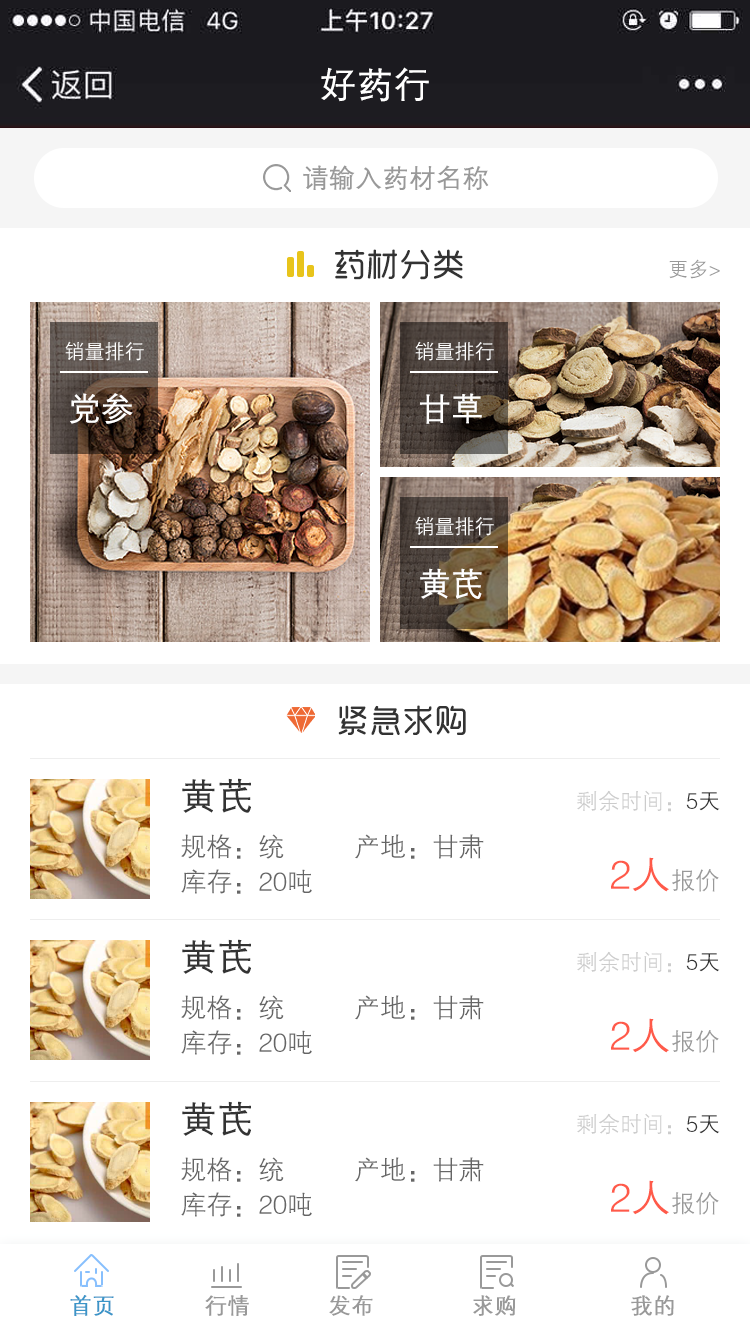
<style>
.page{position:relative;width:750px;height:1334px;background:#ffffff}
.page>*{position:absolute;margin:0}
.t1{font:36px "FZZDXJW--GB1-0";color:#ffffff;font-weight:bold}
.t2{font:26px "FZZDXJW--GB1-0";color:#999999;font-weight:bold}
.t3{font:32.1px "RTWSYueRoudGoDemo-Regular";color:#333333;font-weight:bold}
.t4{font:20px "FZZDXJW--GB1-0";color:#999999}
.t5{font:20px "FZZDXJW--GB1-0";color:#ffffff}
.t6{font:32px "FZZDXJW--GB1-0";color:#ffffff;font-weight:bold}
.t7{font:32px "RTWSYueRoudGoDemo-Regular";color:#333333;font-weight:bold}
.t8{font:36px "FZZDXJW--GB1-0";color:#333333;font-weight:bold}
.t9{font:22px "FZZDXJW--GB1-0";color:#cccccc}
.t10{font:22px "FZZDXJW--GB1-0";color:#333333}
.t11{font:26px "FZZDXJW--GB1-0";color:#666666}
.t12{font:40px "FZZDXJW--GB1-0";color:#ff5a49}
.t13{font:24px "FZZDXJW--GB1-0";color:#999999}
.t14{font:22px "FZZDXJW--GB1-0";color:#3b95c8;font-weight:bold}
.t15{font:22px "FZZDXJW--GB1-0";color:#999999;font-weight:bold}
</style>
<div class="page">
<p class="t1" style="left:321px;top:67px;width:108px;height:35px">好药行</p>
<p class="t2" style="left:303px;top:165px;width:186px;height:25px">请输入药材名称</p>
<p class="t3" style="left:335px;top:249px;width:128px;height:31px">药材分类</p>
<p class="t4" style="left:669px;top:259px;width:51px;height:20px">更多&gt;</p>
<p class="t5" style="left:65px;top:341px;width:79px;height:20px">销量排行</p>
<p class="t5" style="left:415px;top:341px;width:79px;height:20px">销量排行</p>
<p class="t6" style="left:70px;top:393px;width:63px;height:31px">党参</p>
<p class="t6" style="left:420px;top:393px;width:62px;height:31px">甘草</p>
<p class="t5" style="left:415px;top:516px;width:79px;height:20px">销量排行</p>
<p class="t6" style="left:420px;top:568px;width:62px;height:31px">黄芪</p>
<p class="t7" style="left:338px;top:705px;width:128px;height:30px">紧急求购</p>
<p class="t8" style="left:182px;top:778px;width:69px;height:35px">黄芪</p>
<p class="t9" style="left:577px;top:790px;width:143px;height:22px">剩余时间：<span class="t10">5天</span></p>
<p class="t11" style="left:181px;top:834px;width:103px;height:25px">规格：统</p>
<p class="t11" style="left:355px;top:834px;width:129px;height:25px">产地：甘肃</p>
<p class="t12" style="left:611px;top:857px;width:108px;height:35px">2人<span class="t13">报价</span></p>
<p class="t11" style="left:181px;top:869px;width:131px;height:25px">库存：20吨</p>
<p class="t8" style="left:182px;top:939px;width:69px;height:35px">黄芪</p>
<p class="t9" style="left:577px;top:951px;width:143px;height:22px">剩余时间：<span class="t10">5天</span></p>
<p class="t11" style="left:181px;top:995px;width:103px;height:25px">规格：统</p>
<p class="t11" style="left:355px;top:995px;width:129px;height:25px">产地：甘肃</p>
<p class="t12" style="left:611px;top:1018px;width:108px;height:35px">2人<span class="t13">报价</span></p>
<p class="t11" style="left:181px;top:1030px;width:131px;height:25px">库存：20吨</p>
<p class="t8" style="left:182px;top:1101px;width:69px;height:35px">黄芪</p>
<p class="t9" style="left:577px;top:1113px;width:143px;height:22px">剩余时间：<span class="t10">5天</span></p>
<p class="t11" style="left:181px;top:1157px;width:103px;height:25px">规格：统</p>
<p class="t11" style="left:355px;top:1157px;width:129px;height:25px">产地：甘肃</p>
<p class="t12" style="left:611px;top:1180px;width:108px;height:35px">2人<span class="t13">报价</span></p>
<p class="t11" style="left:181px;top:1192px;width:131px;height:25px">库存：20吨</p>
<p class="t14" style="left:70px;top:1295px;width:44px;height:21px">首页</p>
<p class="t15" style="left:205px;top:1295px;width:44px;height:21px">行情</p>
<p class="t15" style="left:329px;top:1295px;width:44px;height:21px">发布</p>
<p class="t15" style="left:473px;top:1295px;width:43px;height:21px">求购</p>
<p class="t15" style="left:631px;top:1295px;width:43px;height:21px">我的</p>
</div>
